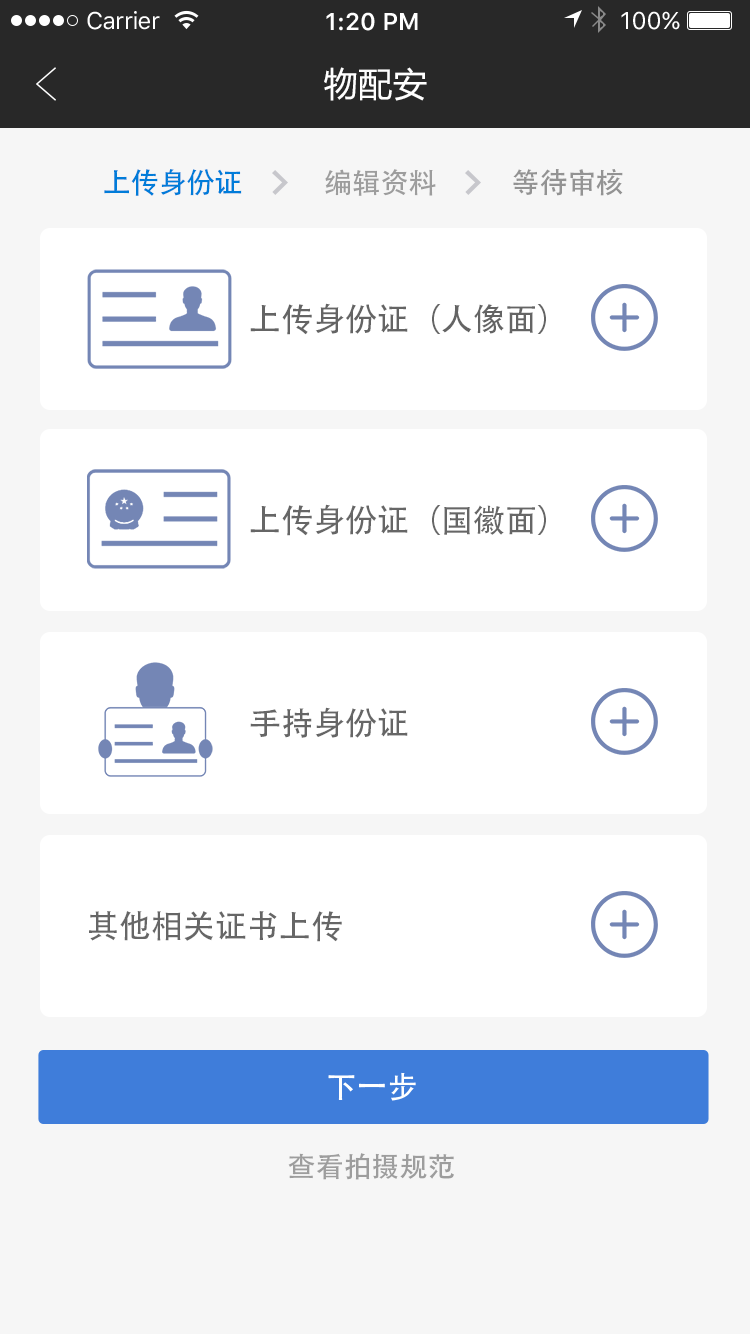
<style>
.page{position:relative;width:750px;height:1334px;background:#ffffff}
.page>*{position:absolute;margin:0}
.t1{font:24px "SFUIText-Regular";letter-spacing:-0.025em;color:#ffffff}
.t2{font:24px "SFUIText-Semibold";color:#ffffff}
.t3{font:24px "SFUIText-Regular";color:#ffffff}
.t4{font:34px "MicrosoftYaHei";letter-spacing:0.02em;color:#ffffff}
.t5{font:28px "AdobeHeitiStd-Regular";color:#007cd9}
.t6{font:28px "AdobeHeitiStd-Regular";color:#9d9d9d}
.t7{font:28px "AdobeHeitiStd-Regular";color:#939393}
.t8{font:32px "AdobeHeitiStd-Regular";color:#646464}
.t9{font:32px "AdobeHeitiStd-Regular";color:#666666}
.t10{font:30px "AdobeHeitiStd-Regular";letter-spacing:0.02em;color:#ffffff}
</style>
<div class="page">
<p class="t1" style="left:87px;top:11px;width:73px;height:19px">Carrier</p>
<p class="t2" style="left:326px;top:12px;width:92px;height:19px">1:20 PM</p>
<p class="t3" style="left:621px;top:11px;width:59px;height:19px">100%</p>
<p class="t4" style="left:324px;top:67px;width:103px;height:34px">物配安</p>
<p class="t5" style="left:104px;top:169px;width:138px;height:27px">上传身份证</p>
<p class="t6" style="left:325px;top:169px;width:111px;height:27px">编辑资料</p>
<p class="t7" style="left:513px;top:169px;width:110px;height:27px">等待审核</p>
<p class="t8" style="left:250px;top:303px;width:296px;height:32px">上传身份证（人像面）</p>
<p class="t9" style="left:250px;top:504px;width:296px;height:32px">上传身份证（国徽面）</p>
<p class="t9" style="left:250px;top:707px;width:158px;height:31px">手持身份证</p>
<p class="t9" style="left:89px;top:911px;width:253px;height:31px">其他相关证书上传</p>
<p class="t10" style="left:328px;top:1072px;width:88px;height:29px">下一步</p>
<p class="t6" style="left:288px;top:1153px;width:166px;height:27px">查看拍摄规范</p>
</div>
